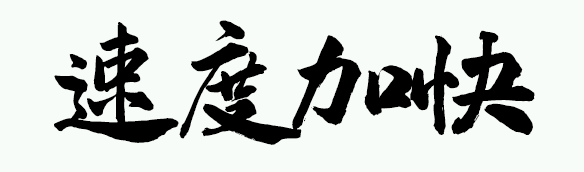
<style>
.page{position:relative;width:584px;height:172px;background:#f8fcf8}
.page>*{position:absolute;margin:0}
.t1{font:133.3px "zihun110hao-wulinjianghuti-Regular";letter-spacing:-0.1em;color:#000000}
</style>
<div class="page">
<p class="t1" style="left:54px;top:20px;width:481px;height:125px">速度加快</p>
</div>
